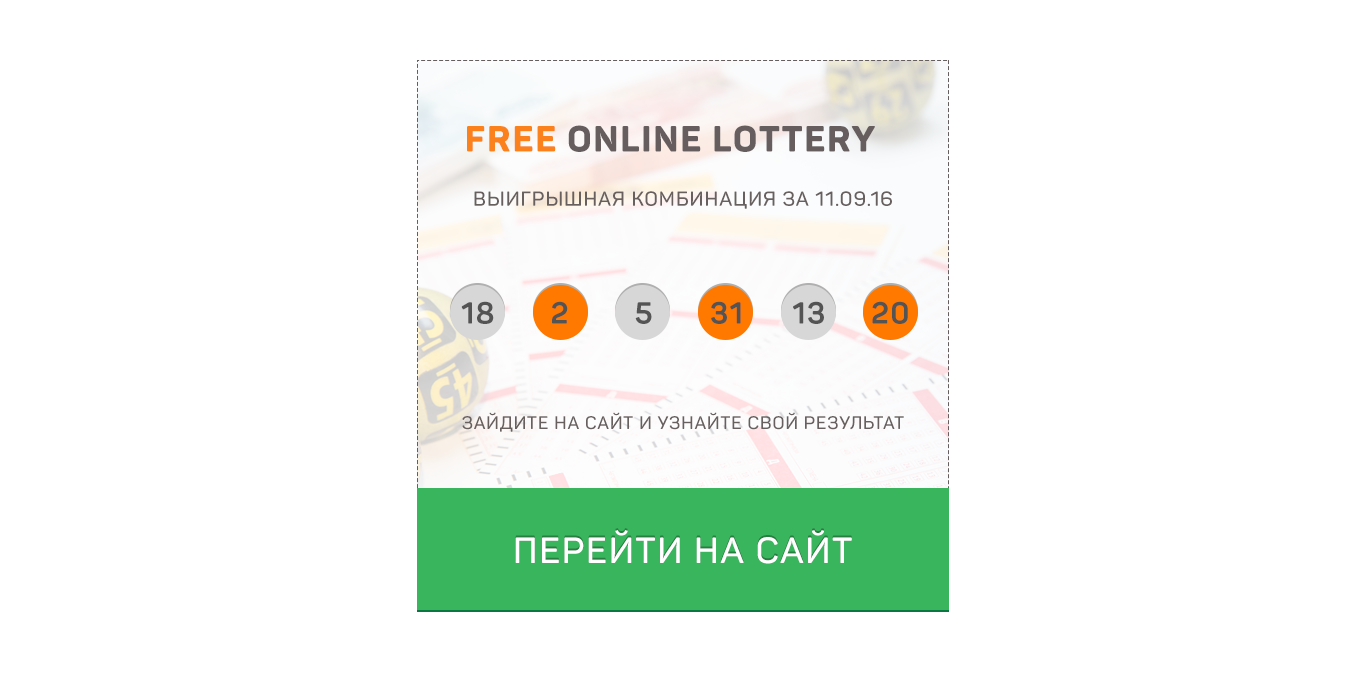
<style>
.page{position:relative;width:1366px;height:700px;background:#ffffff}
.page>*{position:absolute;margin:0}
.t1{font:36px "Panton-ExtraBold";letter-spacing:0.05em;color:#665d5e;text-transform:uppercase}
.t2{font:36px "Panton-ExtraBold";letter-spacing:0.05em;color:#fb811d;text-transform:uppercase}
.t3{font:20px "Panton-SemiBold";letter-spacing:0.05em;color:#685f5f;text-transform:uppercase}
.t4{font:60px "Panton-ExtraBold";letter-spacing:0.05em;color:#ff7800;text-transform:uppercase}
.t5{font:30px "Panton-Bold";letter-spacing:0.05em;color:#545454}
.t6{font:18px "Panton-SemiBold";letter-spacing:0.05em;color:#685f5f;text-transform:uppercase}
.t7{font:36px "Panton-SemiBold";letter-spacing:0.05em;color:#ffffff;text-transform:uppercase}
</style>
<div class="page">
<p class="t1" style="left:467px;top:125px;width:408px;height:27px"><span class="t2">FREE </span>ONLINE LOTTERY</p>
<p class="t3" style="left:474px;top:191px;width:418px;height:18px"><span class="t4"><br></span>выигрышная комбинация за 11.09.16</p>
<p class="t5" style="left:461px;top:301px;width:447px;height:23px">18       2         5       31      13     20</p>
<p class="t6" style="left:462px;top:412px;width:442px;height:20px">зайдите на сайт и узнайте свой результат</p>
<p class="t7" style="left:515px;top:530px;width:337px;height:34px">перейти на сайт</p>
</div>
